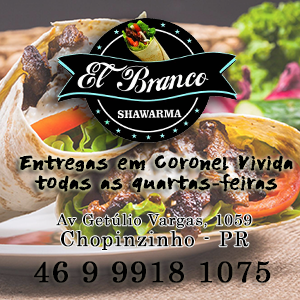
<style>
.page{position:relative;width:300px;height:300px}
.page>*{position:absolute;margin:0}
.t1{font:20.1px/20.1px "DKFlagellumDei-Regular";letter-spacing:0.05em;color:#000000;font-weight:bold}
.t2{font:15.4px/20.5px "Century";letter-spacing:0.05em;color:#000000;font-weight:bold}
.t3{font:20.5px/20.5px "Century";letter-spacing:0.05em;color:#000000;font-weight:bold}
.t4{font:30px "Century";letter-spacing:0.05em;color:#010101;font-weight:bold}
</style>
<div class="page">
<p class="t1" style="left:19px;top:154px;width:274px;height:39px;text-align:center">Entregas em Coronel Vivida<br>todas as quartas-feiras</p>
<p class="t2" style="left:56px;top:213px;width:196px;height:37px;text-align:center">Av Getúlio Vargas, 1059<br><span class="t3">Chopinzinho - PR</span></p>
<p class="t4" style="left:34px;top:261px;width:237px;height:22px">46 9 9918 1075</p>
</div>
